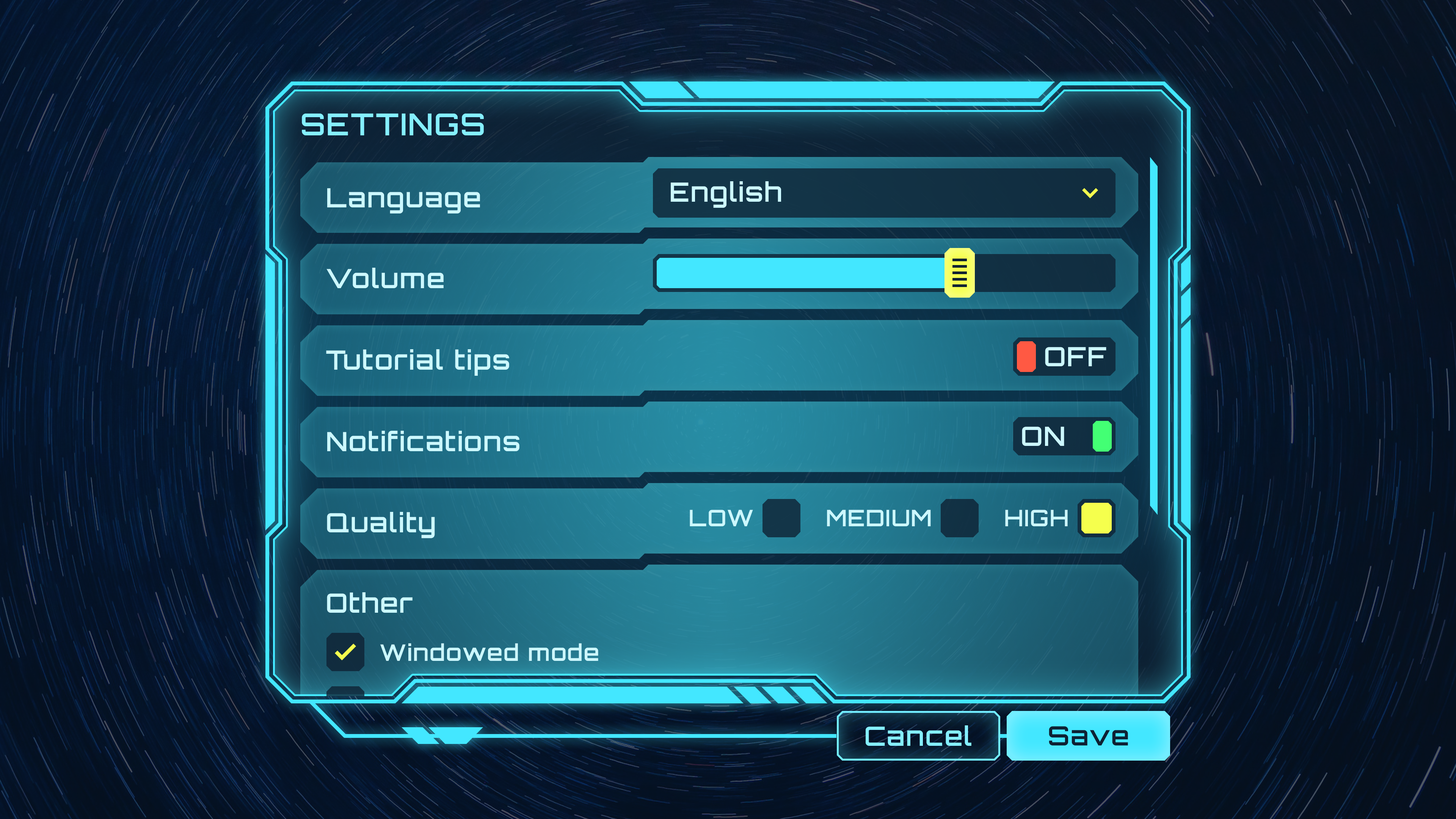
<style>
.page{position:relative;width:1456px;height:819px}
.page>*{position:absolute;margin:0}
.t1{font:30.3px "Orbitron-SemiBold";letter-spacing:0.05em;color:#85efff;text-transform:uppercase}
.t2{font:26.5px "Orbitron-SemiBold";letter-spacing:0.05em;color:#ccf8ff}
.t3{font:26.5px "Orbitron-SemiBold";letter-spacing:0.05em;color:#ccf8ff;text-transform:uppercase}
.t4{font:22.7px "Orbitron-SemiBold";letter-spacing:0.05em;color:#ccf8ff;text-transform:uppercase}
.t5{font:22.7px "Orbitron-SemiBold";letter-spacing:0.05em;color:#ccf8ff}
.t6{font:26.5px "Orbitron-SemiBold";letter-spacing:0.05em;color:#85efff}
.t7{font:26.5px "Orbitron-SemiBold";letter-spacing:0.05em;color:#0e2133}
</style>
<div class="page">
<p class="t1" style="left:302px;top:113px;width:182px;height:22px">Settings</p>
<p class="t2" style="left:671px;top:181px;width:110px;height:27px">English</p>
<p class="t2" style="left:327px;top:188px;width:153px;height:25px">Language</p>
<p class="t2" style="left:326px;top:268px;width:118px;height:20px">Volume</p>
<p class="t2" style="left:326px;top:349px;width:183px;height:27px">Tutorial tips</p>
<p class="t3" style="left:1045px;top:347px;width:61px;height:19px">Off</p>
<p class="t2" style="left:327px;top:431px;width:192px;height:20px">Notifications</p>
<p class="t3" style="left:1022px;top:427px;width:42px;height:19px">On</p>
<p class="t4" style="left:690px;top:510px;width:63px;height:16px">Low</p>
<p class="t4" style="left:827px;top:510px;width:104px;height:16px">Medium</p>
<p class="t4" style="left:1005px;top:510px;width:63px;height:16px">High</p>
<p class="t2" style="left:327px;top:512px;width:108px;height:26px">Quality</p>
<p class="t2" style="left:327px;top:592px;width:86px;height:21px">Other</p>
<p class="t5" style="left:380px;top:643px;width:218px;height:18px">Windowed mode</p>
<p class="t6" style="left:866px;top:725px;width:105px;height:21px">Cancel</p>
<p class="t7" style="left:1049px;top:726px;width:79px;height:19px">Save</p>
</div>
